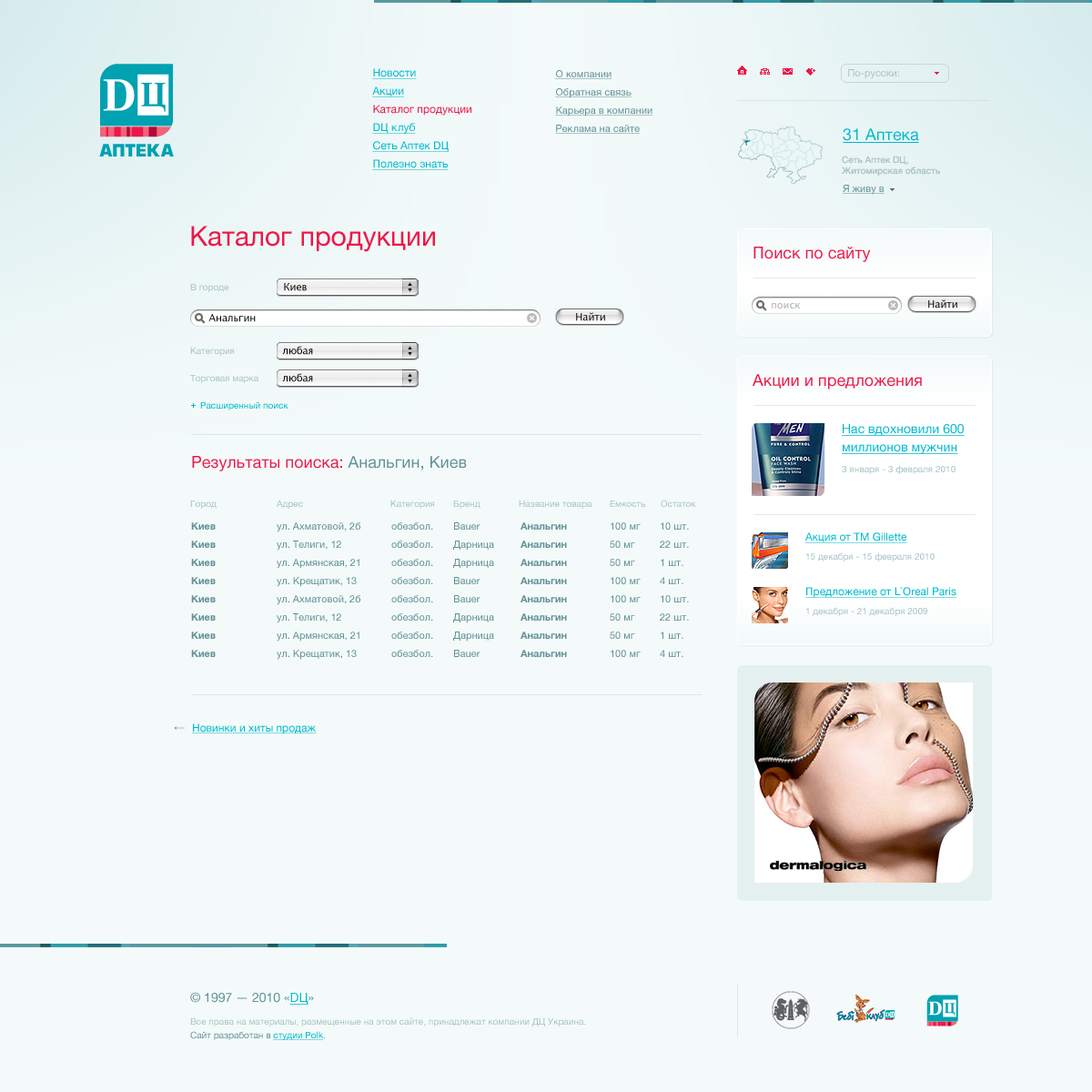
<style>
.page{position:relative;width:1092px;height:1092px;background:#f4fafa}
.page>*{position:absolute;margin:0}
.t1{font:10.9px "HelveticaNeue";color:#00bacc;text-decoration:underline}
.t2{font:10px "HelveticaNeue";color:#619196;text-decoration:underline}
.t3{font:10px "HelveticaNeue";color:#a6c2c5}
.t4{font:10.9px "HelveticaNeue";color:#ed1848}
.t5{font:16.4px "HelveticaNeue";color:#00bacc;text-decoration:underline}
.t6{font:9.1px "HelveticaNeue";color:#a6c2c5}
.t7{font:27.3px "HelveticaNeue";color:#ed1848}
.t8{font:16.4px "HelveticaNeue";color:#ed1848}
.t9{font:10px "LucidaGrande";color:#000000}
.t10{font:9.1px "HelveticaNeue";color:#00bacc}
.t11{font:12.7px/18.2px "HelveticaNeue";color:#00bacc;text-decoration:underline}
.t12{font:16.4px "HelveticaNeue";color:#619196}
.t13{font:10px "HelveticaNeue-Bold";color:#619196}
.t14{font:10px "HelveticaNeue";color:#619196}
.t15{font:10.9px "ArialMT"}
.t16{font:12.7px "HelveticaNeue";color:#619196}
.t17{font:12.7px "HelveticaNeue";color:#00bacc;text-decoration:underline}
.t18{font:9.1px "HelveticaNeue";color:#619196}
.t19{font:9.1px "HelveticaNeue";color:#00bacc;text-decoration:underline}
</style>
<div class="page">
<p class="t1" style="left:372px;top:68px;width:45px;height:11px">Новости</p>
<p class="t2" style="left:555px;top:70px;width:57px;height:9px">О компании</p>
<p class="t3" style="left:848px;top:69px;width:51px;height:10px">По-русски:</p>
<p class="t1" style="left:372px;top:86px;width:33px;height:11px">Акции</p>
<p class="t2" style="left:555px;top:88px;width:77px;height:10px">Обратная связь</p>
<p class="t4" style="left:373px;top:105px;width:98px;height:11px">Каталог продукции</p>
<p class="t2" style="left:555px;top:106px;width:98px;height:10px">Карьера в компании</p>
<p class="t1" style="left:372px;top:123px;width:44px;height:11px">DЦ клуб</p>
<p class="t2" style="left:555px;top:125px;width:85px;height:9px">Реклама на сайте</p>
<p class="t5" style="left:843px;top:128px;width:76px;height:15px">31 Аптека</p>
<p class="t1" style="left:372px;top:141px;width:78px;height:11px">Сеть Аптек DЦ</p>
<p class="t1" style="left:372px;top:159px;width:77px;height:11px">Полезно знать</p>
<p class="t6" style="left:841px;top:156px;width:99px;height:20px">Сеть Аптек DЦ,<br>Житомирская область</p>
<p class="t2" style="left:843px;top:185px;width:42px;height:10px">Я живу в</p>
<p class="t7" style="left:191px;top:226px;width:244px;height:26px">Каталог продукции</p>
<p class="t8" style="left:753px;top:247px;width:118px;height:15px">Поиск по сайту</p>
<p class="t6" style="left:190px;top:284px;width:39px;height:8px">В городе</p>
<p class="t9" style="left:284px;top:283px;width:23px;height:8px">Киев</p>
<p class="t9" style="left:928px;top:299px;width:29px;height:9px">Найти</p>
<p class="t9" style="left:208px;top:314px;width:48px;height:8px">Анальгин</p>
<p class="t9" style="left:576px;top:312px;width:29px;height:9px">Найти</p>
<p class="t6" style="left:190px;top:347px;width:44px;height:9px">Категория</p>
<p class="t9" style="left:282px;top:346px;width:31px;height:9px">любая</p>
<p class="t6" style="left:190px;top:375px;width:69px;height:8px">Торговая марка</p>
<p class="t9" style="left:282px;top:373px;width:31px;height:9px">любая</p>
<p class="t8" style="left:753px;top:374px;width:169px;height:15px">Акции и предложения</p>
<p class="t10" style="left:200px;top:401px;width:88px;height:9px">Расширенный поиск</p>
<p class="t11" style="left:842px;top:424px;width:123px;height:30px">Нас вдохновили 600<br>миллионов мужчин</p>
<p class="t8" style="left:192px;top:456px;width:275px;height:15px">Результаты поиска: <span class="t12">Анальгин, Киев</span></p>
<p class="t6" style="left:842px;top:465px;width:113px;height:9px">3 января - 3 февраля 2010</p>
<p class="t6" style="left:190px;top:500px;width:27px;height:9px">Город</p>
<p class="t6" style="left:277px;top:500px;width:26px;height:9px">Адрес</p>
<p class="t6" style="left:390px;top:500px;width:44px;height:9px">Категория</p>
<p class="t6" style="left:453px;top:500px;width:27px;height:9px">Бренд</p>
<p class="t6" style="left:519px;top:500px;width:73px;height:9px">Название товара</p>
<p class="t6" style="left:610px;top:500px;width:35px;height:7px">Емкость</p>
<p class="t6" style="left:661px;top:500px;width:35px;height:8px">Остаток</p>
<p class="t13" style="left:191px;top:522px;width:25px;height:8px">Киев</p>
<p class="t14" style="left:277px;top:522px;width:83px;height:10px">ул. Ахматовой, 2б</p>
<p class="t14" style="left:391px;top:522px;width:42px;height:8px">обезбол.</p>
<p class="t14" style="left:454px;top:522px;width:26px;height:8px">Bauer</p>
<p class="t13" style="left:521px;top:522px;width:46px;height:8px">Анальгин</p>
<p class="t14" style="left:611px;top:522px;width:30px;height:8px">100 мг</p>
<p class="t14" style="left:661px;top:522px;width:28px;height:8px">10 шт.</p>
<p class="t1" style="left:805px;top:532px;width:102px;height:11px">Акция от ТМ Gillette</p>
<p class="t13" style="left:191px;top:541px;width:25px;height:7px">Киев</p>
<p class="t14" style="left:277px;top:541px;width:64px;height:10px">ул. Телиги, 12</p>
<p class="t14" style="left:391px;top:541px;width:42px;height:7px">обезбол.</p>
<p class="t14" style="left:453px;top:541px;width:41px;height:10px">Дарница</p>
<p class="t13" style="left:521px;top:541px;width:46px;height:7px">Анальгин</p>
<p class="t14" style="left:610px;top:541px;width:25px;height:7px">50 мг</p>
<p class="t14" style="left:660px;top:541px;width:29px;height:7px">22 шт.</p>
<p class="t6" style="left:806px;top:552px;width:129px;height:9px">15 декабря - 15 февраля 2010</p>
<p class="t13" style="left:191px;top:559px;width:25px;height:7px">Киев</p>
<p class="t14" style="left:277px;top:559px;width:82px;height:10px">ул. Армянская, 21</p>
<p class="t14" style="left:391px;top:559px;width:42px;height:7px">обезбол.</p>
<p class="t14" style="left:453px;top:559px;width:41px;height:10px">Дарница</p>
<p class="t13" style="left:521px;top:559px;width:46px;height:7px">Анальгин</p>
<p class="t14" style="left:610px;top:559px;width:25px;height:7px">50 мг</p>
<p class="t14" style="left:661px;top:559px;width:22px;height:7px">1 шт.</p>
<p class="t13" style="left:191px;top:577px;width:25px;height:7px">Киев</p>
<p class="t14" style="left:277px;top:577px;width:80px;height:10px">ул. Крещатик, 13</p>
<p class="t14" style="left:391px;top:577px;width:42px;height:7px">обезбол.</p>
<p class="t14" style="left:454px;top:577px;width:26px;height:7px">Bauer</p>
<p class="t13" style="left:521px;top:577px;width:46px;height:7px">Анальгин</p>
<p class="t14" style="left:611px;top:577px;width:30px;height:7px">100 мг</p>
<p class="t14" style="left:660px;top:577px;width:23px;height:7px">4 шт.</p>
<p class="t1" style="left:805px;top:587px;width:151px;height:11px">Предложение от L`Oreal Paris</p>
<p class="t13" style="left:191px;top:595px;width:25px;height:7px">Киев</p>
<p class="t14" style="left:277px;top:595px;width:83px;height:10px">ул. Ахматовой, 2б</p>
<p class="t14" style="left:391px;top:595px;width:42px;height:7px">обезбол.</p>
<p class="t14" style="left:454px;top:595px;width:26px;height:7px">Bauer</p>
<p class="t13" style="left:521px;top:595px;width:46px;height:7px">Анальгин</p>
<p class="t14" style="left:611px;top:595px;width:30px;height:7px">100 мг</p>
<p class="t14" style="left:661px;top:595px;width:28px;height:7px">10 шт.</p>
<p class="t13" style="left:191px;top:613px;width:25px;height:8px">Киев</p>
<p class="t14" style="left:277px;top:613px;width:64px;height:10px">ул. Телиги, 12</p>
<p class="t14" style="left:391px;top:613px;width:42px;height:8px">обезбол.</p>
<p class="t14" style="left:453px;top:613px;width:41px;height:10px">Дарница</p>
<p class="t13" style="left:521px;top:613px;width:46px;height:8px">Анальгин</p>
<p class="t14" style="left:610px;top:613px;width:25px;height:8px">50 мг</p>
<p class="t14" style="left:660px;top:613px;width:29px;height:8px">22 шт.</p>
<p class="t6" style="left:806px;top:607px;width:121px;height:9px">1 декабря - 21 декабря 2009</p>
<p class="t13" style="left:191px;top:632px;width:25px;height:7px">Киев</p>
<p class="t14" style="left:277px;top:632px;width:82px;height:10px">ул. Армянская, 21</p>
<p class="t14" style="left:391px;top:632px;width:42px;height:7px">обезбол.</p>
<p class="t14" style="left:453px;top:632px;width:41px;height:10px">Дарница</p>
<p class="t13" style="left:521px;top:632px;width:46px;height:7px">Анальгин</p>
<p class="t14" style="left:610px;top:632px;width:25px;height:7px">50 мг</p>
<p class="t14" style="left:661px;top:632px;width:22px;height:7px">1 шт.</p>
<p class="t13" style="left:191px;top:650px;width:25px;height:7px">Киев</p>
<p class="t14" style="left:277px;top:650px;width:80px;height:10px">ул. Крещатик, 13</p>
<p class="t14" style="left:391px;top:650px;width:42px;height:7px">обезбол.</p>
<p class="t14" style="left:454px;top:650px;width:26px;height:7px">Bauer</p>
<p class="t13" style="left:521px;top:650px;width:46px;height:7px">Анальгин</p>
<p class="t14" style="left:611px;top:650px;width:30px;height:7px">100 мг</p>
<p class="t14" style="left:660px;top:650px;width:23px;height:7px">4 шт.</p>
<p class="t15" style="left:174px;top:725px;width:11px;height:5px">←</p>
<p class="t1" style="left:192px;top:723px;width:125px;height:11px">Новинки и хиты продаж</p>
<p class="t16" style="left:190px;top:992px;width:124px;height:13px">© 1997 — 2010 «<span class="t17">DЦ</span>»</p>
<p class="t6" style="left:190px;top:1017px;width:396px;height:9px">Все права на материалы, размещенные на этом сайте, принадлежат компании ДЦ Украина.</p>
<p class="t18" style="left:190px;top:1031px;width:135px;height:9px">Сайт разработан в <span class="t19">студии Polk</span>.</p>
</div>
